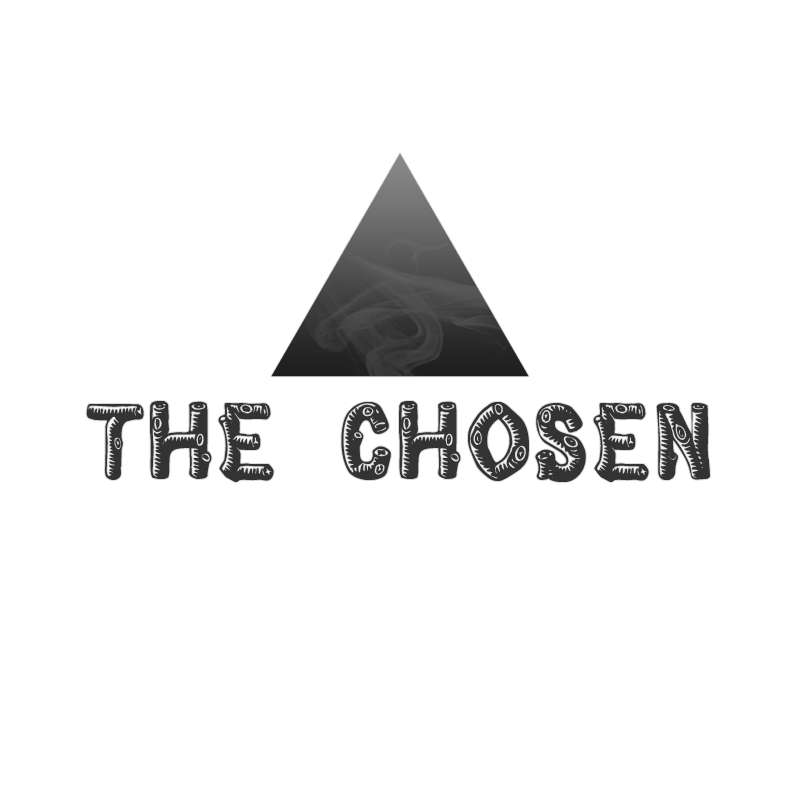
<style>
.page{position:relative;width:800px;height:800px;background:#ffffff}
.page>*{position:absolute;margin:0}
.t1{font:105px "Pinewood";color:#333333}
</style>
<div class="page">
<p class="t1" style="left:86px;top:401px;width:624px;height:81px">The Chosen</p>
</div>
